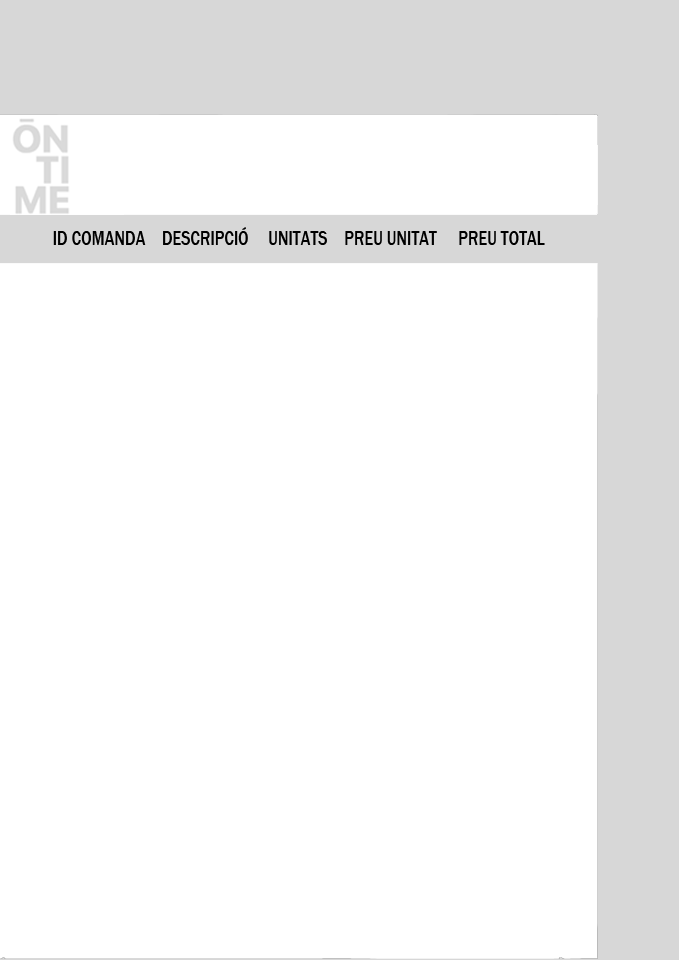
<style>
.page{position:relative;width:679px;height:960px;background:#ffffff}
.page>*{position:absolute;margin:0}
.t1{font:21.1px "FranklinGothic-Medium";color:#000000;scale:0.77 1}
</style>
<div class="page">
<p class="t1" style="left:53px;top:231px;width:93px;height:14px">ID COMANDA</p>
<p class="t1" style="left:163px;top:227px;width:85px;height:18px">DESCRIPCIÓ</p>
<p class="t1" style="left:269px;top:231px;width:58px;height:14px">UNITATS</p>
<p class="t1" style="left:345px;top:231px;width:92px;height:14px">PREU UNITAT</p>
<p class="t1" style="left:459px;top:231px;width:86px;height:14px">PREU TOTAL</p>
</div>
